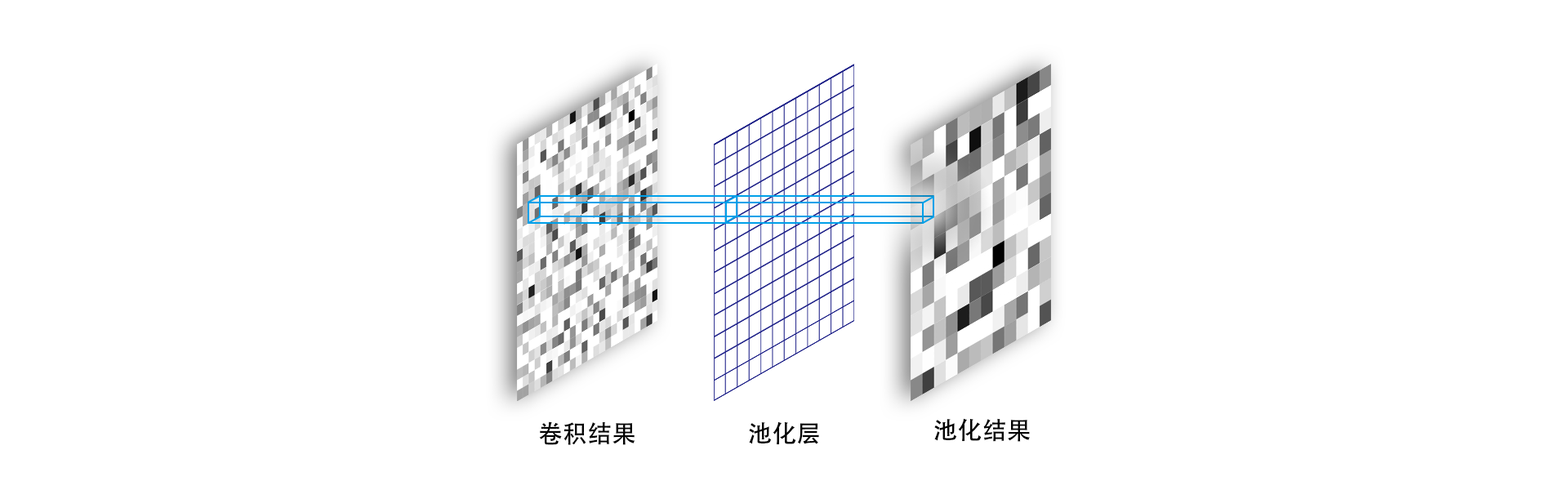
<style>
.page{position:relative;width:1568px;height:490px;background:#ffffff}
.page>*{position:absolute;margin:0}
.t1{font:24.5px "AdobeHeitiStd-Regular";color:#000000}
</style>
<div class="page">
<p class="t1" style="left:539px;top:421px;width:96px;height:24px">卷积结果</p>
<p class="t1" style="left:749px;top:421px;width:70px;height:24px">池化层</p>
<p class="t1" style="left:934px;top:418px;width:96px;height:24px">池化结果</p>
</div>
